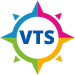
<style>
.page{position:relative;width:75px;height:75px;background:#ffffff}
.page>*{position:absolute;margin:0}
.t1{font:19px "OpenSans-Extrabold";color:#0055b0}
</style>
<div class="page">
<p class="t1" style="left:19px;top:30px;width:35px;height:15px">VTS</p>
</div>
